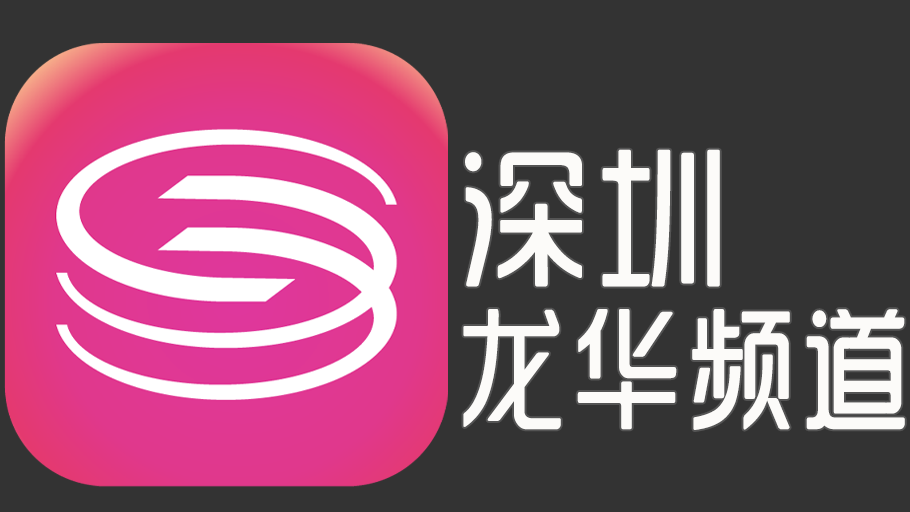
<style>
.page{position:relative;width:910px;height:512px;background:#333333}
.page>*{position:absolute;margin:0}
.t1{font:132px/160px "SJyunlvyuan";letter-spacing:0.02em;color:#fcfbf9;scale:0.85 1}
.t2{font:150px/160px "SJyunlvyuan";letter-spacing:0.02em;color:#fcfbf9;scale:0.9 1}
</style>
<div class="page">
<p class="t1" style="left:463px;top:149px;width:442px;height:281px"><span class="t2">深圳<br></span>龙华频道</p>
</div>
